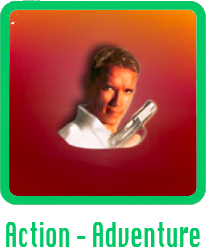
<style>
.page{position:relative;width:206px;height:250px}
.page>*{position:absolute;margin:0}
.t1{font:33px "Krungthep";color:#00c864;scale:0.59 1}
</style>
<div class="page">
<p class="t1" style="left:6px;top:222px;width:194px;height:25px">Action - Adventure</p>
</div>
